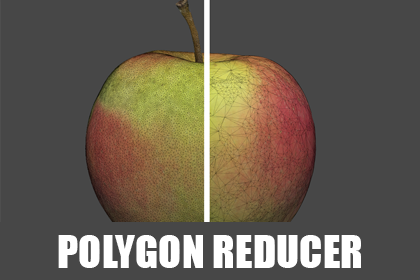
<style>
.page{position:relative;width:420px;height:280px;background:#474747}
.page>*{position:absolute;margin:0}
.t1{font:42.5px "Impact";color:#ffffff}
</style>
<div class="page">
<p class="t1" style="left:58px;top:235px;width:303px;height:33px">POLYGON REDUCER</p>
</div>
